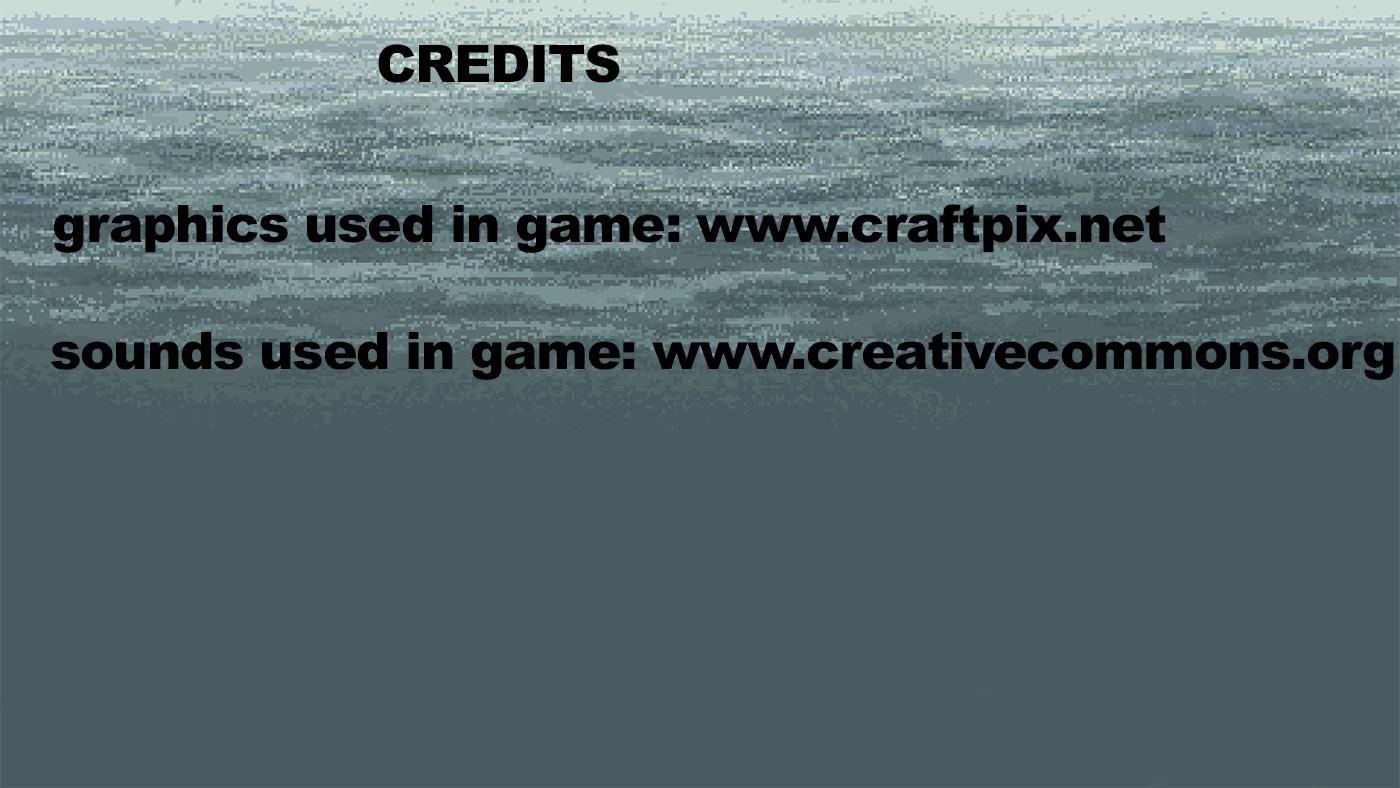
<style>
.page{position:relative;width:1400px;height:788px;background:#485b60}
.page>*{position:absolute;margin:0}
.t1{font:51.7px "Arial-Black";letter-spacing:-0.025em;color:#000000}
</style>
<div class="page">
<p class="t1" style="left:378px;top:44px;width:242px;height:39px">CREDITS</p>
<p class="t1" style="left:53px;top:204px;width:1113px;height:49px">graphics used in game: www.craftpix.net</p>
<p class="t1" style="left:51px;top:332px;width:1343px;height:48px">sounds used in game: www.creativecommons.org</p>
</div>
